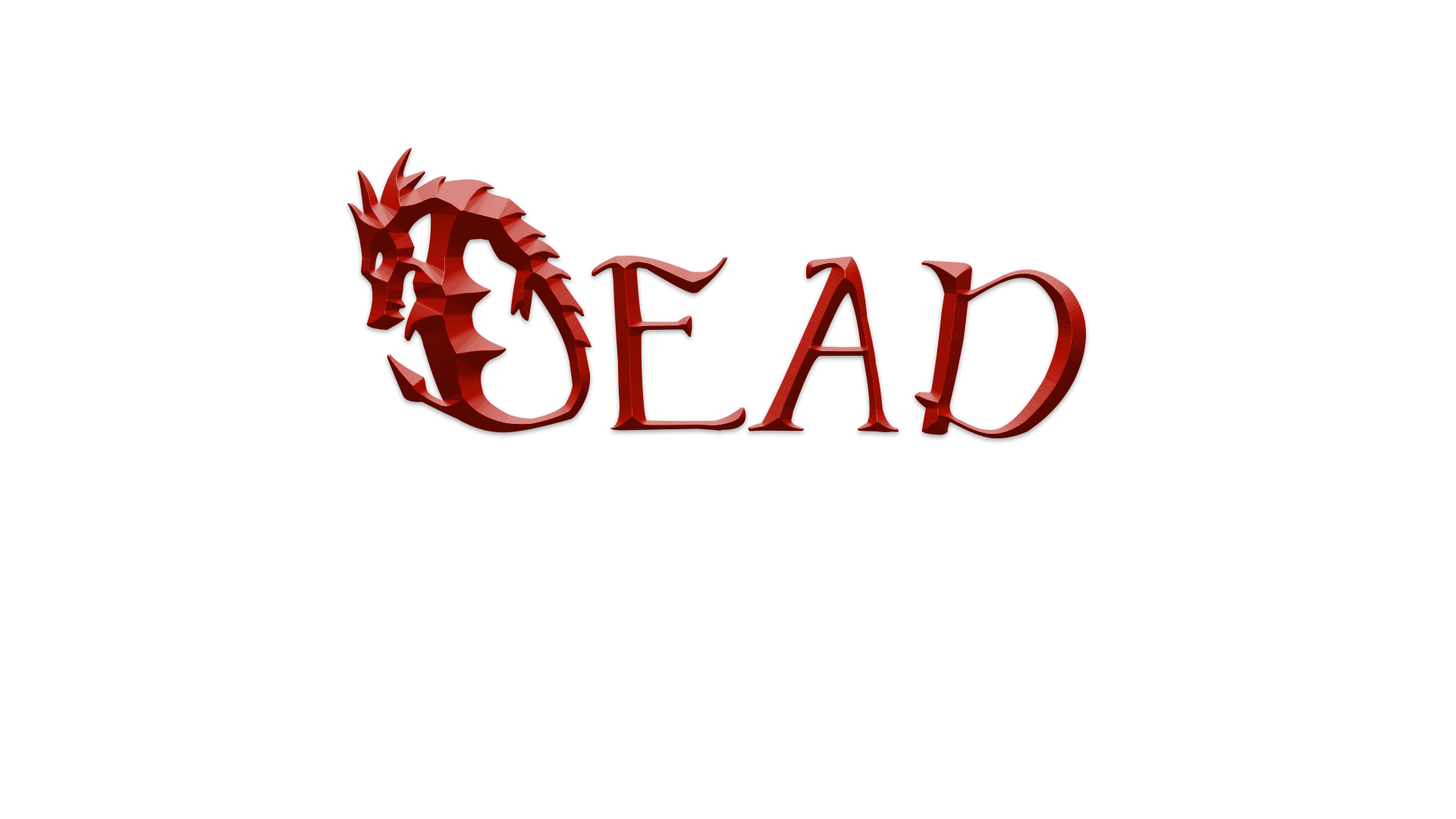
<style>
.page{position:relative;width:1456px;height:819px;background:#ffffff}
.page>*{position:absolute;margin:0}
.t1{font:109.2px "EGDragonCaps"}
</style>
<div class="page">
<p class="t1" style="left:347px;top:147px;width:740px;height:291px;text-align:center">Dead</p>
</div>
